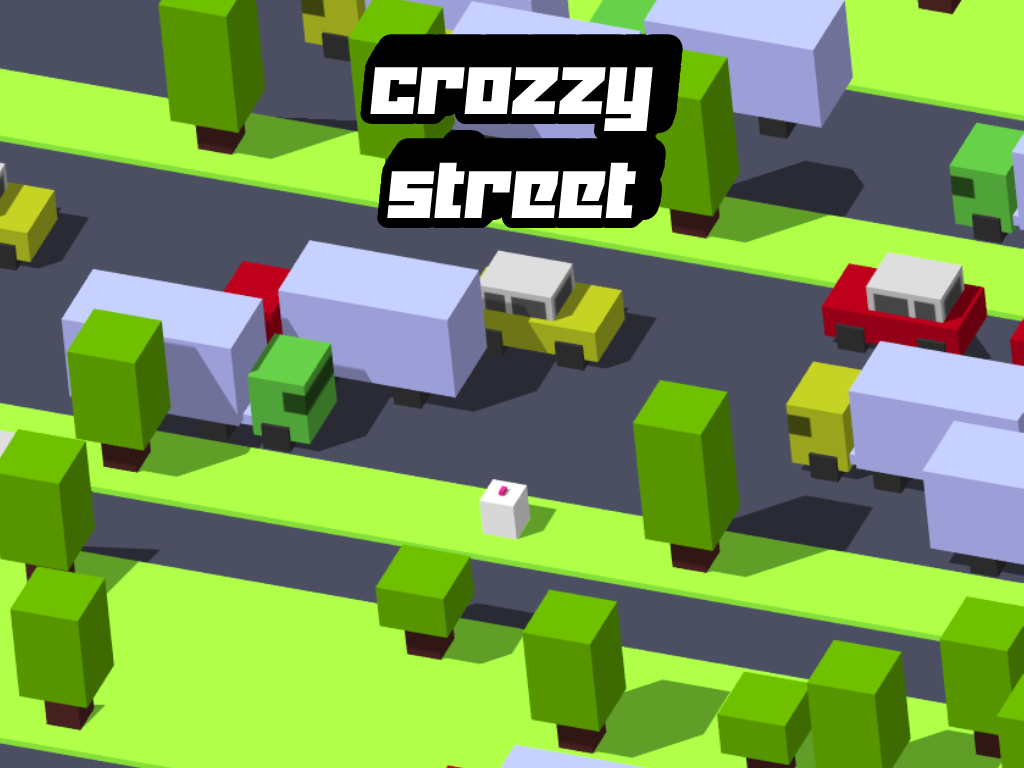
<style>
.page{position:relative;width:1024px;height:768px;background:#4c4e62}
.page>*{position:absolute;margin:0}
.t1{font:87px "Yukarimobile";color:#ffffff}
</style>
<div class="page">
<p class="t1" style="left:370px;top:67px;width:283px;height:151px;text-align:center">crozzy<br>street</p>
</div>
